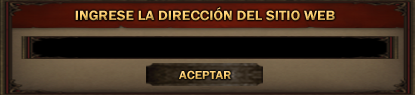
<style>
.page{position:relative;width:415px;height:95px}
.page>*{position:absolute;margin:0}
.t1{font:14px "FranklinGothic-Demi";scale:1.07 1}
.t2{font:12px "FranklinGothic-Demi";scale:1.07 1}
</style>
<div class="page">
<p class="t1" style="left:75px;top:7px;width:260px;height:14px">INGRESE LA DIRECCIÓN DEL SITIO WEB</p>
<p class="t2" style="left:179px;top:70px;width:52px;height:10px">ACEPTAR</p>
</div>
